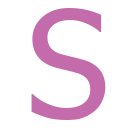
<style>
.page{position:relative;width:128px;height:128px;background:#ffffff}
.page>*{position:absolute;margin:0}
.t1{font:148.2px "Tahoma";color:#c46bac}
</style>
<div class="page">
<p class="t1" style="left:31px;top:8px;width:75px;height:112px">S</p>
</div>
